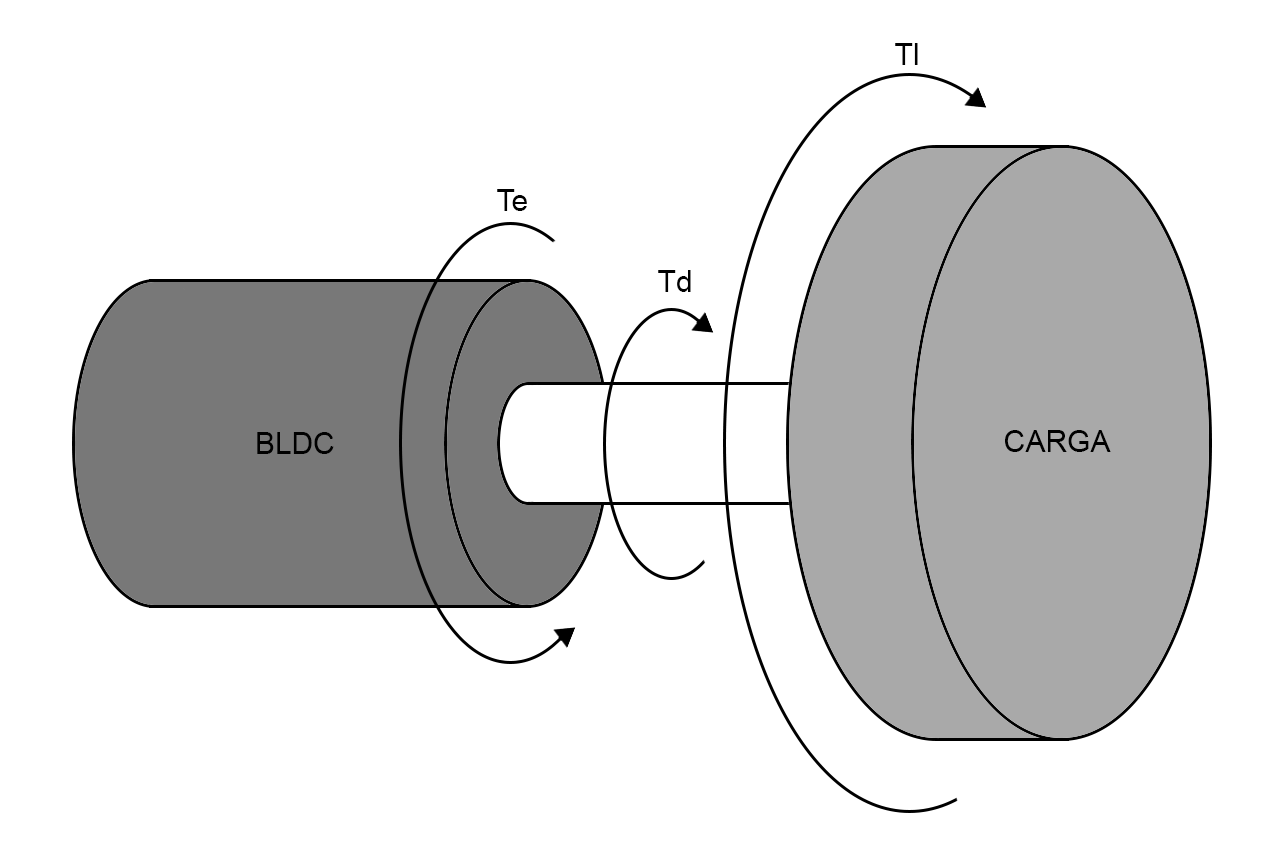
<style>
.page{position:relative;width:1280px;height:862px;background:#ffffff}
.page>*{position:absolute;margin:0}
.t1{font:30px "ArialMT";color:#000000}
</style>
<div class="page">
<p class="t1" style="left:895px;top:43px;width:23px;height:22px">Tl</p>
<p class="t1" style="left:497px;top:189px;width:30px;height:22px">Te</p>
<p class="t1" style="left:658px;top:270px;width:33px;height:22px">Td</p>
<p class="t1" style="left:257px;top:432px;width:77px;height:22px">BLDC</p>
<p class="t1" style="left:1005px;top:430px;width:106px;height:22px">CARGA</p>
</div>
